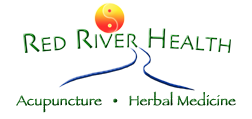
<style>
.page{position:relative;width:252px;height:119px;background:#ffffff}
.page>*{position:absolute;margin:0}
.t1{font:28.5px "Skia-Regular";font-variant:small-caps}
.t2{font:14px "Papyrus";font-weight:bold}
</style>
<div class="page">
<p class="t1" style="left:23px;top:28px;width:208px;height:25px">Red River Health</p>
<p class="t2" style="left:16px;top:91px;width:220px;height:22px">Acupuncture   •   Herbal Medicine</p>
</div>
